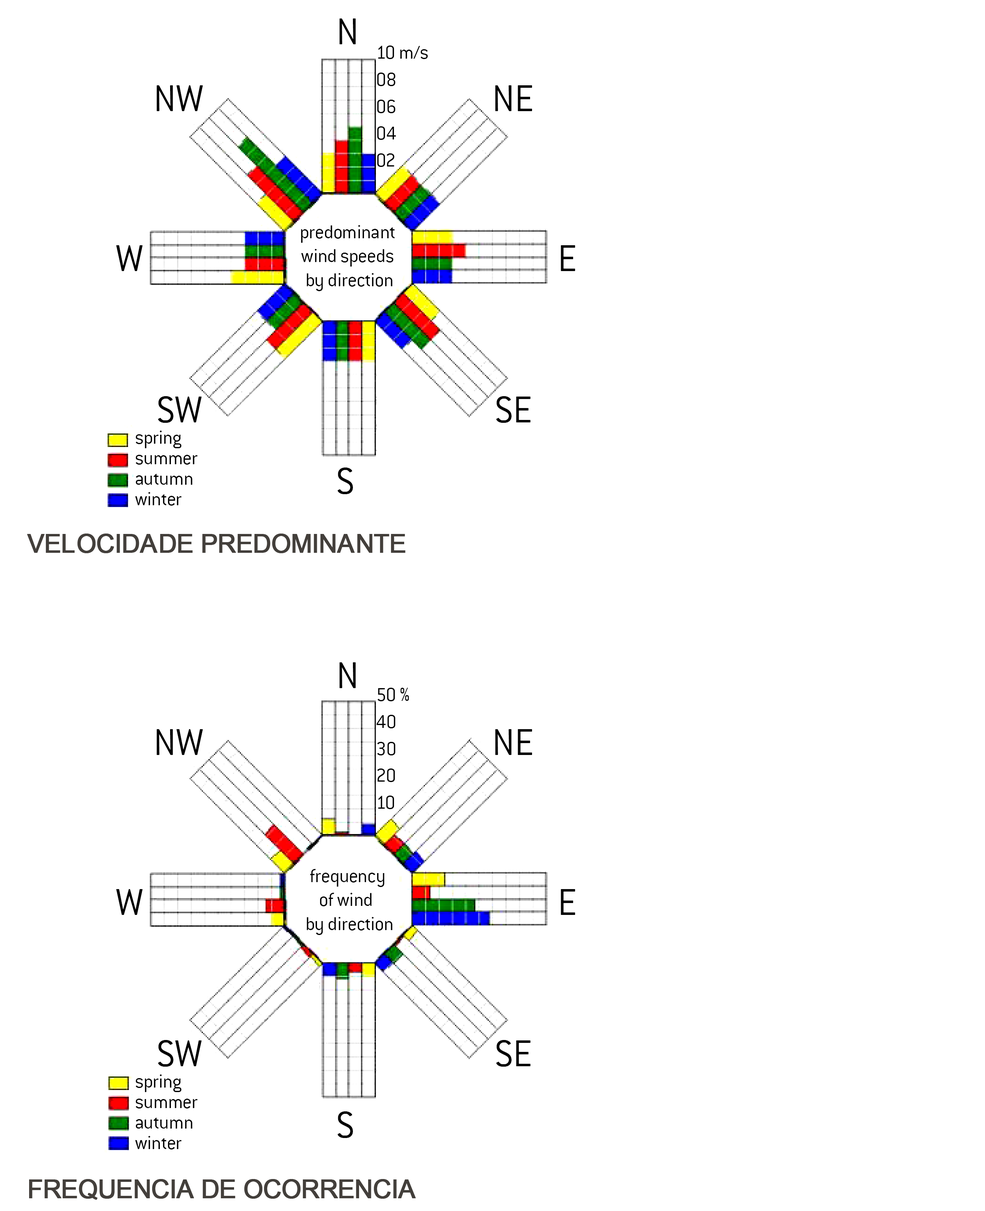
<style>
.page{position:relative;width:985px;height:1211px;background:#ffffff}
.page>*{position:absolute;margin:0}
.t1{font:41px "ConduitITC-Light";letter-spacing:-0.005em;color:#000000}
.t2{font:4.9px/27px "ConduitITC-Light";letter-spacing:-0.005em;color:#000000}
.t3{font:20.5px/23.9px "ConduitITC-Light";letter-spacing:-0.005em;color:#000000}
.t4{font:4.9px/20.5px "ConduitITC-Light";letter-spacing:-0.005em;color:#000000}
</style>
<div class="page">
<p class="t1" style="left:339px;top:18px;width:17px;height:26px">N</p>
<p class="t2" style="left:377px;top:46px;width:51px;height:121px">10 m/s<br>08<br>06<br>04<br>02</p>
<p class="t1" style="left:157px;top:85px;width:46px;height:26px">NW</p>
<p class="t1" style="left:495px;top:85px;width:37px;height:26px">NE</p>
<p class="t3" style="left:301px;top:225px;width:94px;height:66px;text-align:center">predominant <br>wind speeds <br>by direction</p>
<p class="t1" style="left:116px;top:245px;width:27px;height:26px">W</p>
<p class="t1" style="left:561px;top:245px;width:14px;height:26px">E</p>
<p class="t1" style="left:158px;top:396px;width:44px;height:27px">SW</p>
<p class="t1" style="left:496px;top:396px;width:34px;height:27px">SE</p>
<p class="t4" style="left:135px;top:430px;width:63px;height:75px">spring<br>summer<br>autumn<br>winter</p>
<p class="t1" style="left:337px;top:467px;width:16px;height:27px">S</p>
<p class="t1" style="left:339px;top:662px;width:17px;height:26px">N</p>
<p class="t2" style="left:376px;top:687px;width:33px;height:122px">50 %<br>40<br>30<br>20<br>10</p>
<p class="t1" style="left:157px;top:729px;width:46px;height:26px">NW</p>
<p class="t1" style="left:495px;top:729px;width:37px;height:26px">NE</p>
<p class="t3" style="left:307px;top:869px;width:85px;height:66px;text-align:center">frequency <br>of wind  <br>by direction</p>
<p class="t1" style="left:116px;top:889px;width:27px;height:26px">W</p>
<p class="t1" style="left:561px;top:889px;width:14px;height:26px">E</p>
<p class="t1" style="left:158px;top:1040px;width:44px;height:26px">SW</p>
<p class="t1" style="left:496px;top:1040px;width:34px;height:26px">SE</p>
<p class="t4" style="left:135px;top:1074px;width:63px;height:75px">spring<br>summer<br>autumn<br>winter</p>
<p class="t1" style="left:337px;top:1111px;width:16px;height:27px">S</p>
</div>
